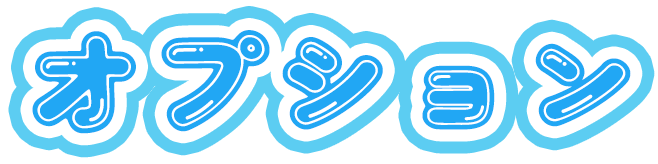
<style>
.page{position:relative;width:658px;height:164px;background:#ffffff}
.page>*{position:absolute;margin:0}
.t1{font:125px "DokiDokiFantasia";color:#21a7f4}
</style>
<div class="page">
<p class="t1" style="left:32px;top:30px;width:599px;height:104px">オプション</p>
</div>
